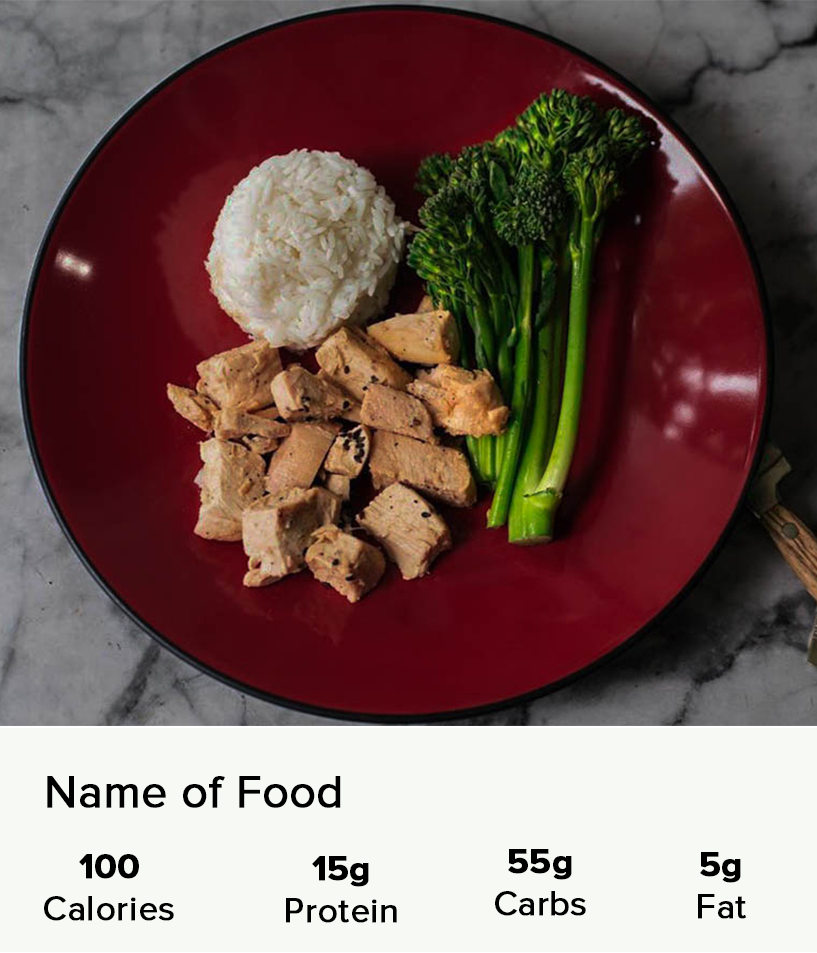
<style>
.page{position:relative;width:817px;height:953px;background:#f7f9f4}
.page>*{position:absolute;margin:0}
.t1{font:45.6px "ProximaNova-Regular";color:#000000;font-weight:bold}
.t2{font:34.9px "ProximaNova-Regular";color:#000000;font-weight:bold}
.t3{font:34.9px "ProximaNova-Bold";color:#c63f55;font-weight:bold}
.t4{font:34.9px "ProximaNova-Bold";color:#000000;font-weight:bold}
</style>
<div class="page">
<p class="t1" style="left:47px;top:776px;width:294px;height:32px">Name of Food</p>
<p class="t2" style="left:44px;top:854px;width:130px;height:67px;text-align:center"><span class="t3"><br><br></span><span class="t4">100<br></span>Calories</p>
<p class="t2" style="left:286px;top:856px;width:111px;height:67px;text-align:center"><span class="t3"><br></span><span class="t4"><br>15g<br></span>Protein</p>
<p class="t2" style="left:495px;top:849px;width:91px;height:67px;text-align:center"><span class="t4"><br><br>55g<br></span>Carbs</p>
<p class="t2" style="left:698px;top:852px;width:48px;height:67px;text-align:center"><span class="t4"><br><br>5g<br></span>Fat</p>
</div>
